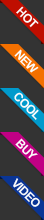
<style>
.page{position:relative;width:44px;height:220px;background:#333333}
.page>*{position:absolute;margin:0}
.t1{font:12px "Arial-BoldMT";letter-spacing:-0.05em;color:#fafafa;text-transform:uppercase}
</style>
<div class="page">
<p class="t1" style="left:16px;top:6px;width:23px;height:22px;rotate:45deg">hot</p>
<p class="t1" style="left:14px;top:49px;width:25px;height:24px;rotate:45deg">new</p>
<p class="t1" style="left:14px;top:92px;width:25px;height:28px;rotate:45deg">cool</p>
<p class="t1" style="left:15px;top:138px;width:23px;height:21px;rotate:45deg">buy</p>
<p class="t1" style="left:13px;top:178px;width:27px;height:29px;rotate:45deg">video</p>
</div>
